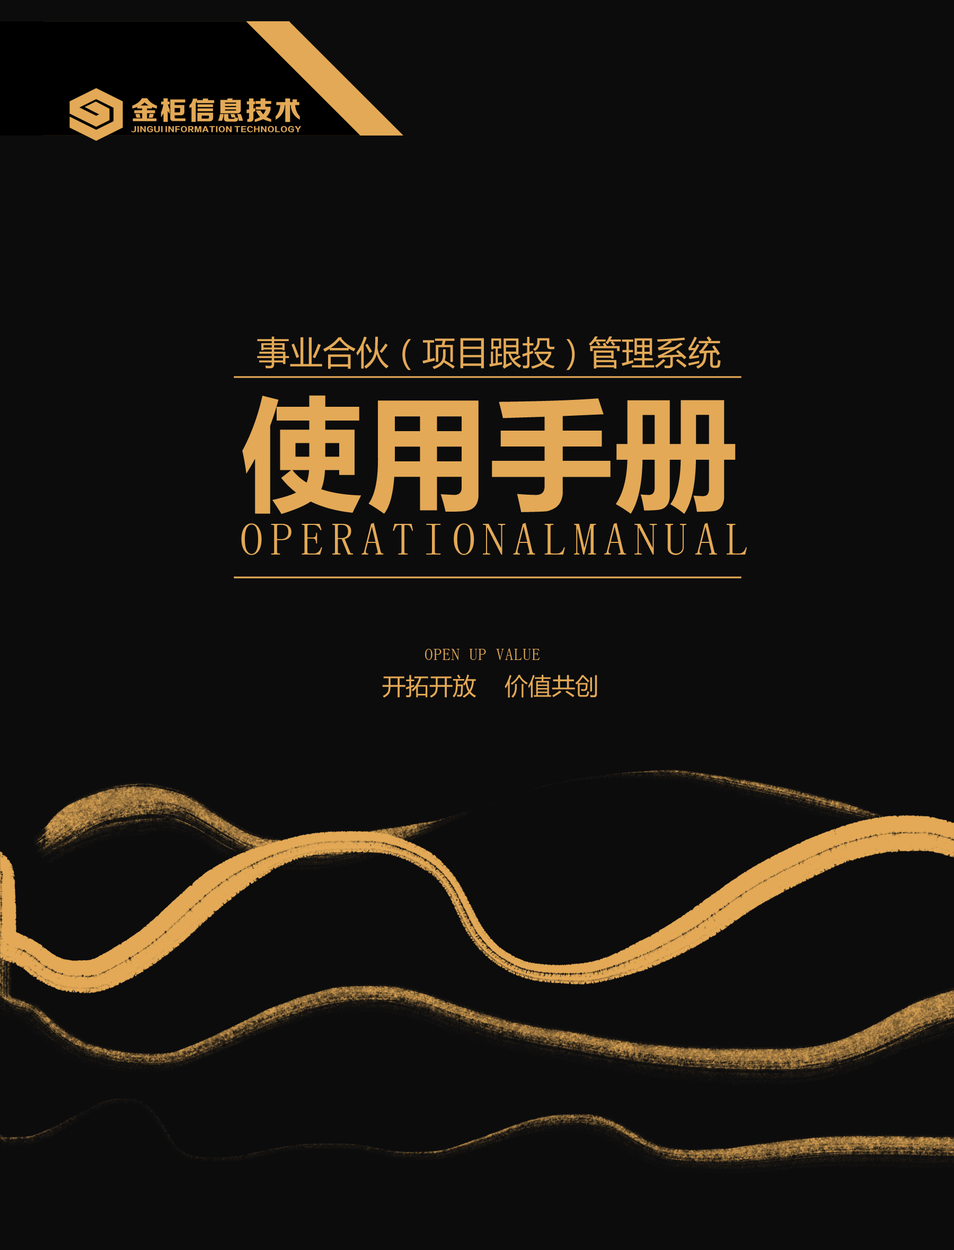
<style>
.page{position:relative;width:954px;height:1250px;background:#0c0c0d}
.page>*{position:absolute;margin:0}
.t1{font:33.2px "MicrosoftYaHei";color:#e3a956;text-transform:uppercase}
.t2{font:122.4px "MicrosoftYaHei-Bold";letter-spacing:0.02em;color:#e3a956;text-transform:uppercase}
.t3{font:46px "SimSun";letter-spacing:0.16em;color:#e3a956;text-transform:uppercase}
.t4{font:16.6px "SimSun";letter-spacing:0.04em;color:#e3a956;text-transform:uppercase}
.t5{font:23.6px "MicrosoftYaHei";color:#e3a956}
</style>
<div class="page">
<p class="t1" style="left:257px;top:336px;width:464px;height:34px">事业合伙（项目跟投）管理系统</p>
<p class="t2" style="left:242px;top:395px;width:493px;height:119px">使用手册</p>
<p class="t3" style="left:241px;top:523px;width:506px;height:32px">operationalManual</p>
<p class="t4" style="left:425px;top:648px;width:114px;height:12px">open up value</p>
<p class="t5" style="left:382px;top:674px;width:215px;height:24px">开拓开放    价值共创</p>
</div>
